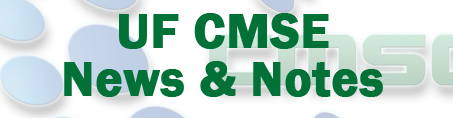
<style>
.page{position:relative;width:453px;height:118px;background:#ffffff}
.page>*{position:absolute;margin:0}
.t1{font:50px/24px "FranklinGothic-Demi";color:#027137;font-weight:bold}
</style>
<div class="page">
<p class="t1" style="left:64px;top:13px;width:319px;height:84px;text-align:center">UF CMSE <br><br>News &amp; Notes</p>
</div>
